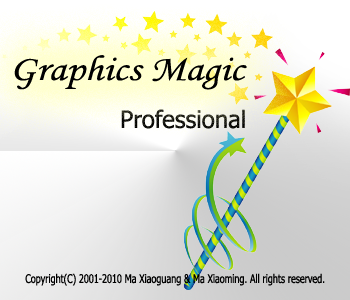
<style>
.page{position:relative;width:350px;height:300px}
.page>*{position:absolute;margin:0}
.t1{font:36px "MonotypeCorsiva";color:#000000;scale:1.17 1}
.t2{font:24px "Tahoma"}
.t3{font:12px "Tahoma";color:#000000;scale:0.76 1}
</style>
<div class="page">
<p class="t1" style="left:14px;top:55px;width:233px;height:35px">Graphics Magic</p>
<p class="t2" style="left:121px;top:109px;width:124px;height:20px">Professional</p>
<p class="t3" style="left:25px;top:273px;width:300px;height:13px">Copyright(C) 2001-2010 Ma Xiaoguang &amp; Ma Xiaoming. All rights reserved.</p>
</div>
